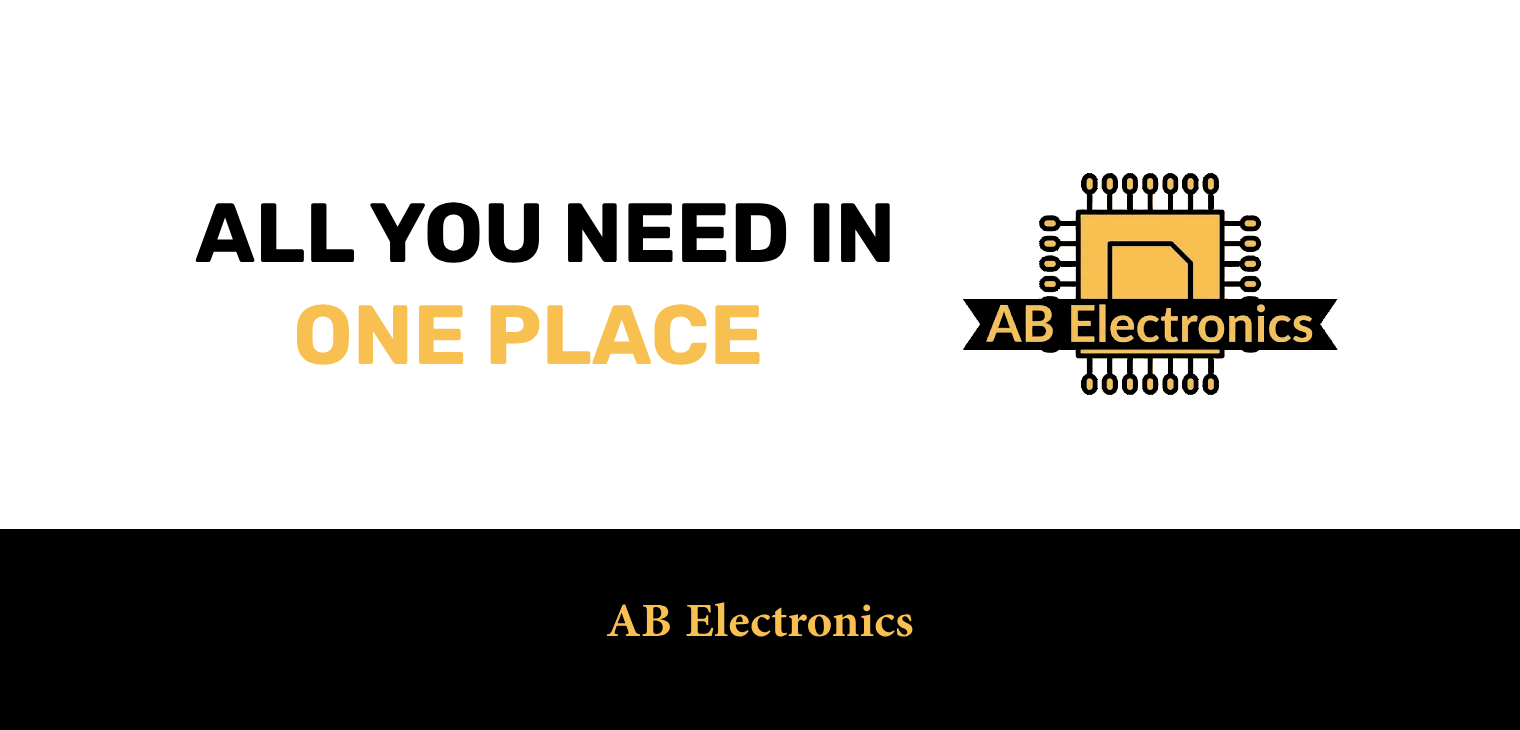
<style>
.page{position:relative;width:1520px;height:730px;background:#ffffff}
.page>*{position:absolute;margin:0}
.t1{font:84px "Rubik-Bold";color:#000000}
.t2{font:84px "Rubik-Bold";color:#f8c051}
.t3{font:67px "AdobeArabic-Bold";color:#f8c051}
</style>
<div class="page">
<p class="t1" style="left:195px;top:202px;width:695px;height:61px">ALL YOU NEED IN</p>
<p class="t2" style="left:296px;top:304px;width:464px;height:61px">ONE PLACE</p>
<p class="t3" style="left:606px;top:602px;width:307px;height:35px">AB Electronics</p>
</div>
